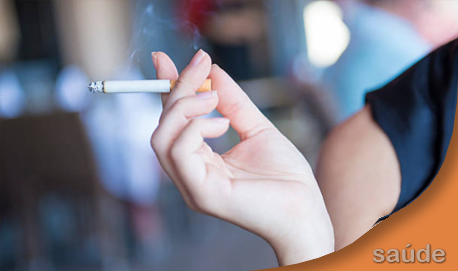
<style>
.page{position:relative;width:458px;height:271px}
.page>*{position:absolute;margin:0}
.t1{font:25px "ArialRoundedMTBold";color:#c6a48d}
</style>
<div class="page">
<p class="t1" style="left:373px;top:244px;width:72px;height:18px">saúde</p>
</div>
